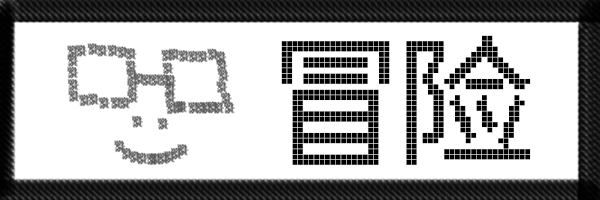
<style>
.page{position:relative;width:600px;height:200px;background:#ffffff}
.page>*{position:absolute;margin:0}
.t1{font:129.6px "FZXS24--GB1-0";color:#000000}
</style>
<div class="page">
<p class="t1" style="left:281px;top:35px;width:250px;height:130px">冒险</p>
</div>
